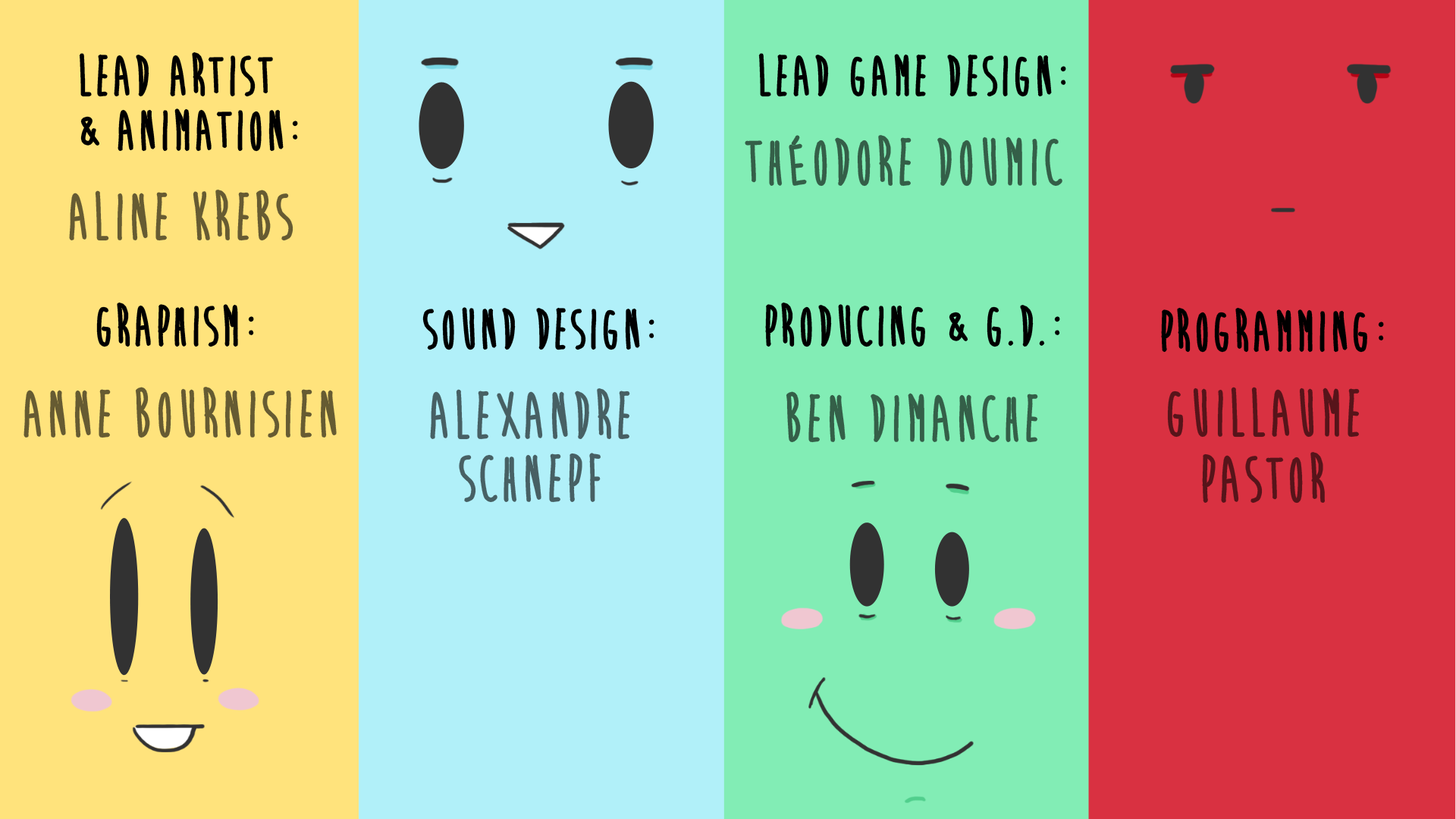
<style>
.page{position:relative;width:1456px;height:819px;background:#d93141}
.page>*{position:absolute;margin:0}
.t1{font:56.9px "BrainFlower";letter-spacing:0.025em;color:#000000}
.t2{font:66.4px "BrainFlower";letter-spacing:0.025em;color:#345f48}
.t3{font:66.4px "BrainFlower";letter-spacing:0.025em;color:#665b32}
.t4{font:66.4px "BrainFlower";letter-spacing:0.025em;color:#476064}
.t5{font:66.4px "BrainFlower";letter-spacing:0.025em;color:#57141a}
</style>
<div class="page">
<p class="t1" style="left:80px;top:53px;width:191px;height:43px">Lead artist</p>
<p class="t1" style="left:760px;top:55px;width:305px;height:41px">Lead Game Design:</p>
<p class="t1" style="left:82px;top:110px;width:215px;height:40px">&amp; animation:</p>
<p class="t2" style="left:746px;top:136px;width:315px;height:49px">Théodore Doumic</p>
<p class="t3" style="left:71px;top:191px;width:221px;height:49px">Aline Krebs</p>
<p class="t1" style="left:98px;top:303px;width:155px;height:43px">Graphism:</p>
<p class="t1" style="left:767px;top:303px;width:292px;height:43px">Producing &amp; G.D.:</p>
<p class="t1" style="left:424px;top:309px;width:229px;height:40px">Sound Design:</p>
<p class="t1" style="left:1163px;top:309px;width:219px;height:42px">Programming:</p>
<p class="t3" style="left:25px;top:388px;width:310px;height:49px">Anne Bournisien</p>
<p class="t4" style="left:431px;top:390px;width:198px;height:48px">Alexandre</p>
<p class="t5" style="left:1169px;top:388px;width:189px;height:48px">Guillaume</p>
<p class="t2" style="left:787px;top:393px;width:250px;height:48px">Ben Dimanche</p>
<p class="t4" style="left:460px;top:454px;width:139px;height:47px">schnepf</p>
<p class="t5" style="left:1203px;top:453px;width:120px;height:49px">Pastor</p>
</div>
